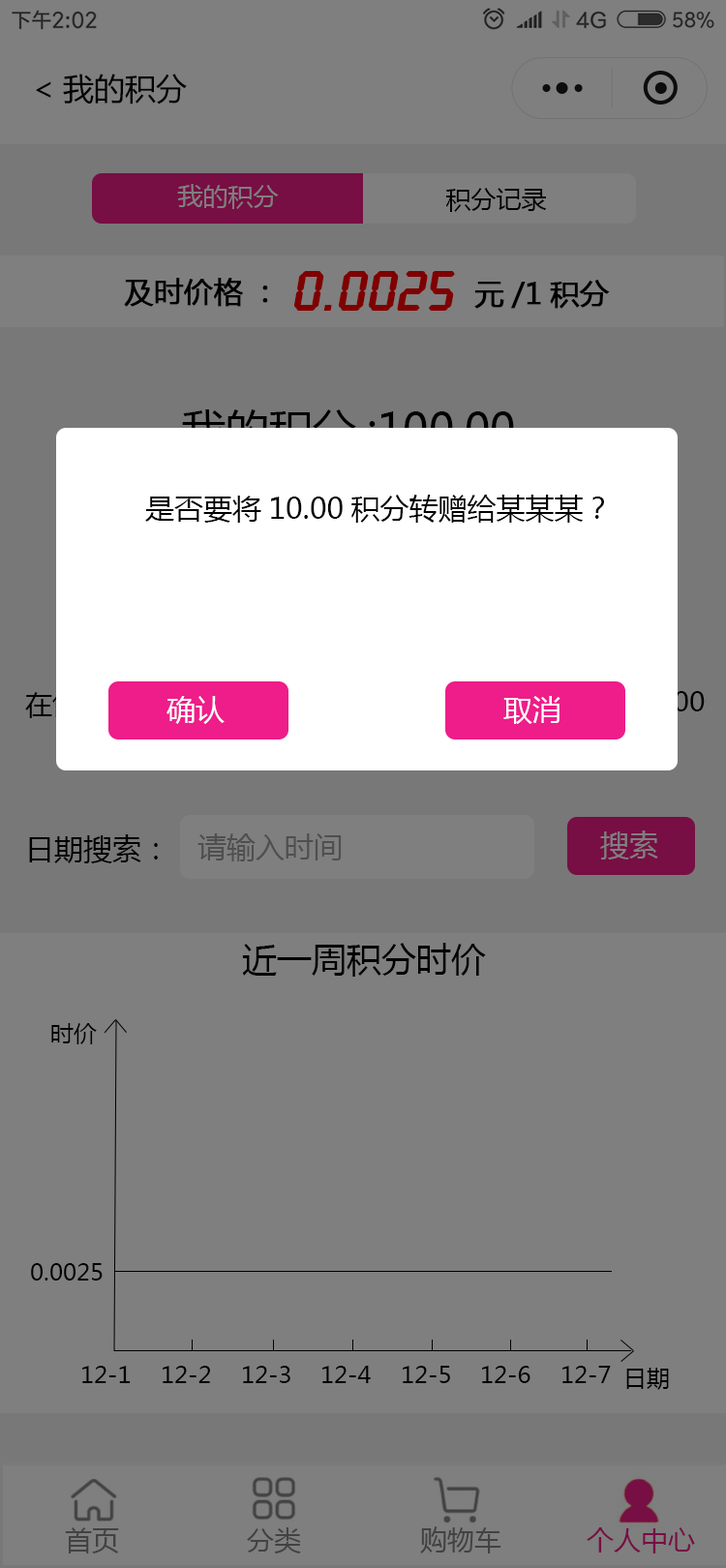
<style>
.page{position:relative;width:726px;height:1568px;background:#7f7f7f}
.page>*{position:absolute;margin:0}
.t1{font:31px "MicrosoftYaHei";color:#000000}
.t2{font:25.2px "MicrosoftYaHei";color:#7f7f7f}
.t3{font:25.2px "MicrosoftYaHei";color:#000000}
.t4{font:29px "MicrosoftYaHei";color:#000000;font-weight:bold}
.t5{font:58.1px "LcdD";color:#7f0000;font-weight:bold}
.t6{font:29px "MicrosoftYaHei";color:#000000}
.t7{font:29px "MicrosoftYaHei";color:#ffffff}
.t8{font:29px "MicrosoftYaHei";color:#4f4f4f}
.t9{font:29px "MicrosoftYaHei";color:#7f7f7f}
.t10{font:34.8px "MicrosoftYaHei";color:#000000}
.t11{font:23.2px "MicrosoftYaHei";color:#000000}
</style>
<div class="page">
<p class="t1" style="left:36px;top:74px;width:151px;height:31px">&lt;我的积分</p>
<p class="t2" style="left:177px;top:184px;width:102px;height:25px">我的积分</p>
<p class="t3" style="left:446px;top:188px;width:101px;height:24px">积分记录</p>
<p class="t4" style="left:124px;top:278px;width:144px;height:29px">及时价格：</p>
<p class="t5" style="left:294px;top:271px;width:161px;height:40px">0.0025</p>
<p class="t4" style="left:474px;top:280px;width:136px;height:29px">元/1积分</p>
<p class="t6" style="left:145px;top:495px;width:459px;height:28px">是否要将10.00积分转赠给某某某？</p>
<p class="t7" style="left:166px;top:696px;width:59px;height:28px">确认</p>
<p class="t7" style="left:503px;top:696px;width:57px;height:28px">取消</p>
<p class="t8" style="left:197px;top:833px;width:145px;height:28px">请输入时间</p>
<p class="t9" style="left:600px;top:830px;width:58px;height:29px">搜索</p>
<p class="t6" style="left:29px;top:834px;width:129px;height:29px">日期搜索：</p>
<p class="t10" style="left:242px;top:943px;width:244px;height:34px">近一周积分时价</p>
<p class="t11" style="left:51px;top:1023px;width:46px;height:21px">时价</p>
<p class="t11" style="left:31px;top:1263px;width:72px;height:18px">0.0025</p>
<p class="t11" style="left:82px;top:1366px;width:49px;height:17px">12-1</p>
<p class="t11" style="left:163px;top:1366px;width:47px;height:17px">12-2</p>
<p class="t11" style="left:243px;top:1366px;width:47px;height:17px">12-3</p>
<p class="t11" style="left:322px;top:1366px;width:49px;height:17px">12-4</p>
<p class="t11" style="left:403px;top:1366px;width:47px;height:17px">12-5</p>
<p class="t11" style="left:482px;top:1366px;width:48px;height:17px">12-6</p>
<p class="t11" style="left:562px;top:1366px;width:49px;height:17px">12-7</p>
<p class="t11" style="left:626px;top:1368px;width:43px;height:22px">日期</p>
</div>
